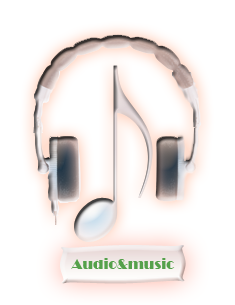
<style>
.page{position:relative;width:235px;height:305px;background:#ffffff}
.page>*{position:absolute;margin:0}
.t1{font:14px "Broadway";color:#55a14b}
</style>
<div class="page">
<p class="t1" style="left:71px;top:258px;width:104px;height:11px">Audio&amp;music</p>
</div>
